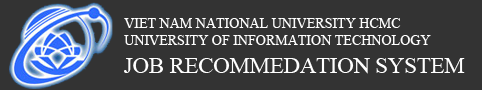
<style>
.page{position:relative;width:482px;height:90px;background:#333333}
.page>*{position:absolute;margin:0}
.t1{font:14px "TimesNewRomanPSMT";color:#fefefe}
.t2{font:22.5px "TimesNewRomanPSMT";color:#ffffff}
</style>
<div class="page">
<p class="t1" style="left:124px;top:18px;width:307px;height:27px">VIET NAM NATIONAL UNIVERSITY HCMC<br>UNIVERSITY OF INFORMATION TECHNOLOGY</p>
<p class="t2" style="left:124px;top:58px;width:341px;height:16px">JOB RECOMMEDATION SYSTEM</p>
</div>
